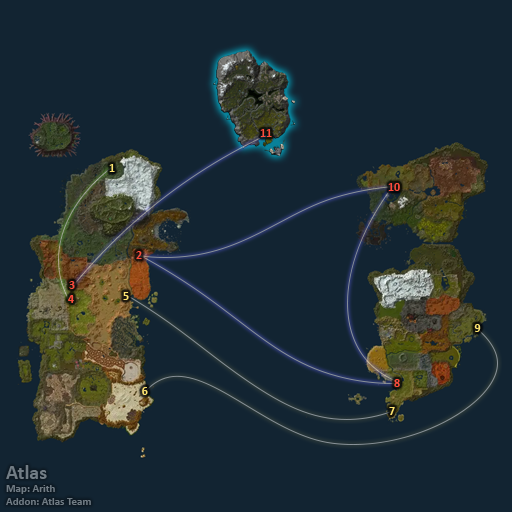
<style>
.page{position:relative;width:512px;height:512px;background:#122432}
.page>*{position:absolute;margin:0}
.t1{font:12px "Calibri-Bold";color:#ff4c3c}
.t2{font:12px "Calibri-Bold";color:#fee570}
</style>
<div class="page">
<p class="t1" style="left:260px;top:129px;width:12px;height:8px">11</p>
<p class="t2" style="left:109px;top:164px;width:6px;height:8px">1</p>
<p class="t1" style="left:388px;top:183px;width:12px;height:8px">10</p>
<p class="t1" style="left:136px;top:251px;width:6px;height:8px">2</p>
<p class="t1" style="left:69px;top:281px;width:6px;height:8px">3</p>
<p class="t2" style="left:123px;top:292px;width:6px;height:8px">5</p>
<p class="t1" style="left:68px;top:295px;width:6px;height:8px">4</p>
<p class="t2" style="left:474px;top:324px;width:7px;height:8px">9</p>
<p class="t2" style="left:142px;top:387px;width:6px;height:8px">6</p>
<p class="t1" style="left:394px;top:379px;width:6px;height:8px">8</p>
<p class="t2" style="left:389px;top:407px;width:6px;height:8px">7</p>
</div>
